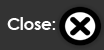
<style>
.page{position:relative;width:104px;height:50px;background:#333333}
.page>*{position:absolute;margin:0}
.t1{font:17px "CenturyGothic-Bold";letter-spacing:-0.025em;color:#fefefe}
</style>
<div class="page">
<p class="t1" style="left:7px;top:17px;width:49px;height:13px">Close:</p>
</div>
